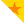
<style>
.page{position:relative;width:24px;height:24px;background:#ffffff}
.page>*{position:absolute;margin:0}
.t1{font:14.1px "KozGoStd-ExtraLight";letter-spacing:0.4em;color:#ff8400}
</style>
<div class="page">
<p class="t1" style="left:8px;top:2px;width:13px;height:13px">★</p>
</div>
